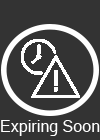
<style>
.page{position:relative;width:100px;height:140px;background:#333333}
.page>*{position:absolute;margin:0}
.t1{font:16.1px "MicrosoftSansSerif";color:#ffffff}
</style>
<div class="page">
<p class="t1" style="left:1px;top:120px;width:99px;height:16px">Expiring Soon</p>
</div>
